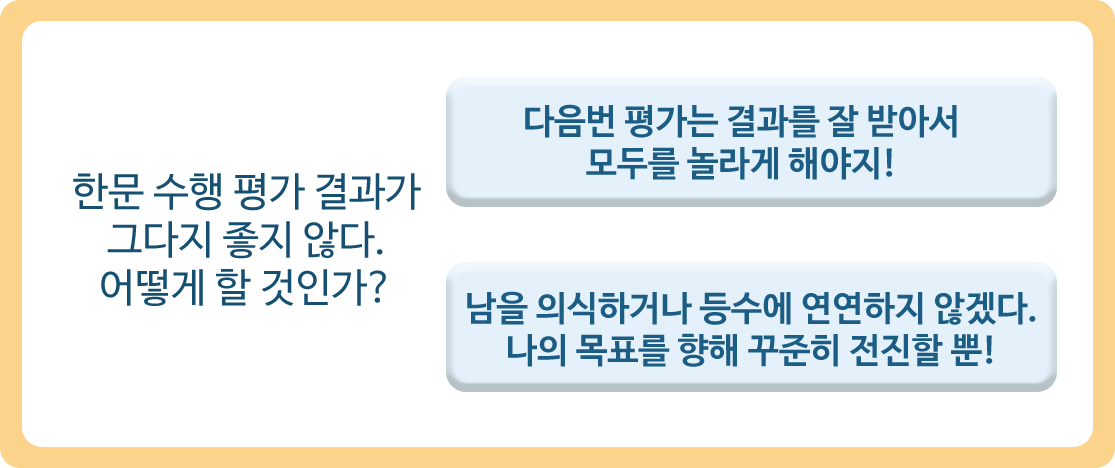
<style>
.page{position:relative;width:1115px;height:468px;background:#ffffff}
.page>*{position:absolute;margin:0}
.t1{font:35px "NanumBarunGothicBold";color:#1b5d84}
.t2{font:40px "NanumBarunGothic";color:#154f71}
</style>
<div class="page">
<p class="t1" style="left:525px;top:104px;width:432px;height:76px;text-align:center">다음번 평가는 결과를 잘 받아서<br>모두를 놀라게 해야지!</p>
<p class="t2" style="left:73px;top:173px;width:348px;height:133px;text-align:center">한문 수행 평가 결과가<br>그다지 좋지 않다.<br>어떻게 할 것인가?</p>
<p class="t1" style="left:467px;top:291px;width:569px;height:76px;text-align:center">남을 의식하거나 등수에 연연하지 않겠다.<br>나의 목표를 향해 꾸준히 전진할 뿐!</p>
</div>
